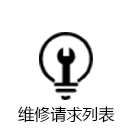
<style>
.page{position:relative;width:132px;height:132px;background:#ffffff}
.page>*{position:absolute;margin:0}
.t1{font:16px "MicrosoftYaHei";color:#000000}
</style>
<div class="page">
<p class="t1" style="left:18px;top:106px;width:97px;height:17px">维修请求列表</p>
</div>
